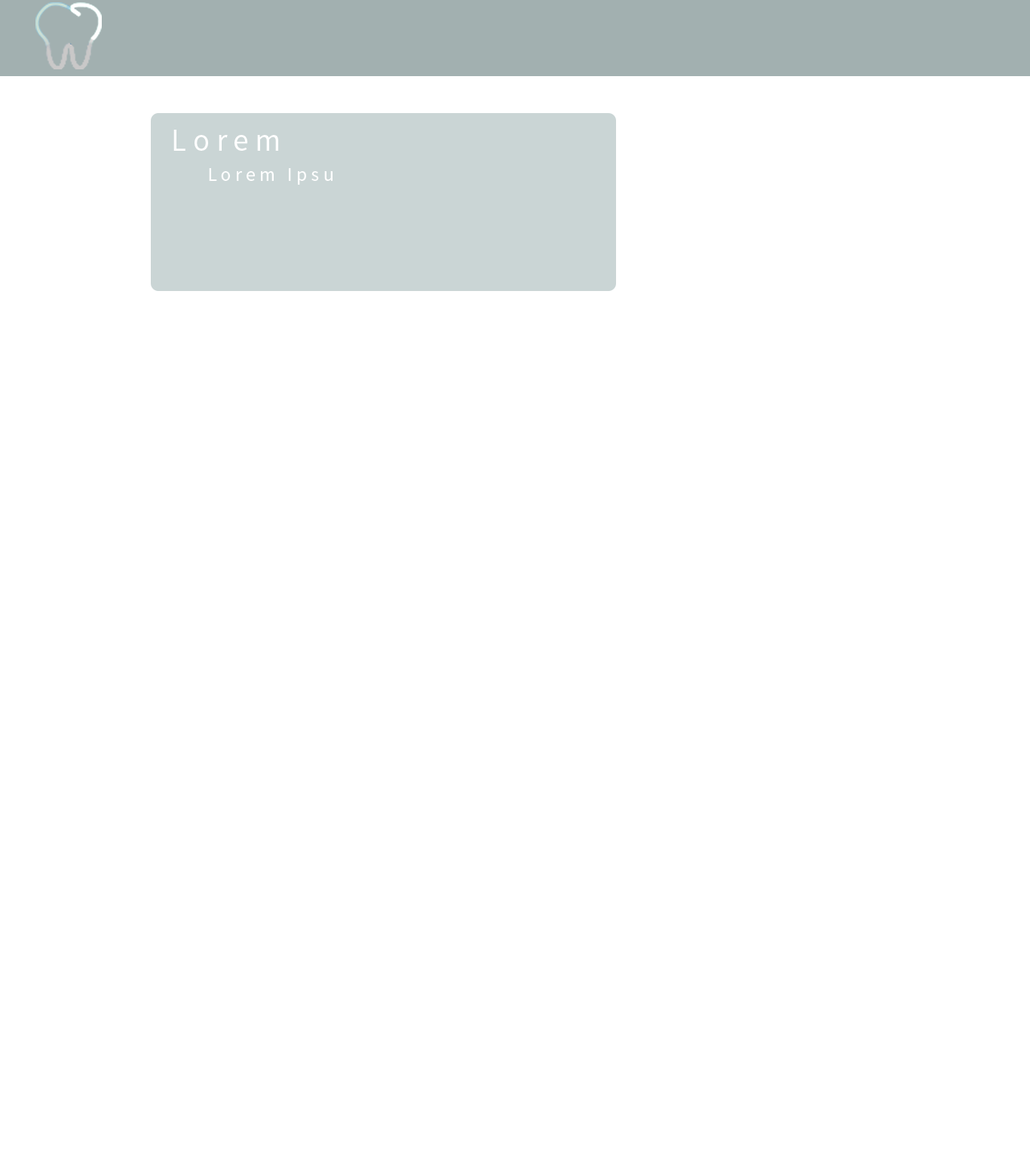
<style>
.page{position:relative;width:1030px;height:1158px;background:#ffffff}
.page>*{position:absolute;margin:0}
.t1{font:31.7px "SourceSansPro-Regular";letter-spacing:0.22em;color:#ffffff;scale:0.97 1}
.t2{font:19.6px "SourceSansPro-Regular";letter-spacing:0.22em;color:#ffffff;scale:0.97 1}
</style>
<div class="page">
<p class="t1" style="left:173px;top:130px;width:105px;height:21px">Lorem</p>
<p class="t2" style="left:209px;top:168px;width:123px;height:17px">Lorem Ipsu</p>
</div>
